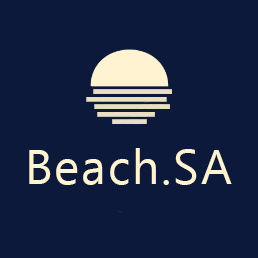
<style>
.page{position:relative;width:258px;height:258px;background:#0c193b}
.page>*{position:absolute;margin:0}
.t1{font:48px "Ebrima";letter-spacing:0.04em;color:#fff3d1}
</style>
<div class="page">
<p class="t1" style="left:29px;top:148px;width:203px;height:37px">Beach.SA</p>
</div>
